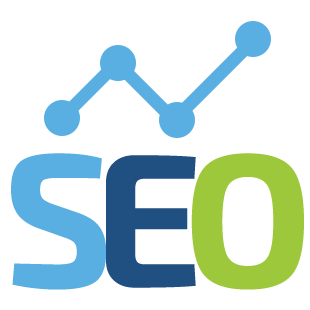
<style>
.page{position:relative;width:310px;height:310px;background:#ffffff}
.page>*{position:absolute;margin:0}
.t1{font:190px "Exo2-Bold";letter-spacing:-0.1em;color:#59afe2}
.t2{font:190px "Exo2-Bold";letter-spacing:-0.1em;color:#205081}
.t3{font:190px "Exo2-Bold";letter-spacing:-0.1em;color:#9ec83b}
</style>
<div class="page">
<p class="t1" style="left:11px;top:153px;width:293px;height:137px">S<span class="t2">E</span><span class="t3">O</span></p>
</div>
